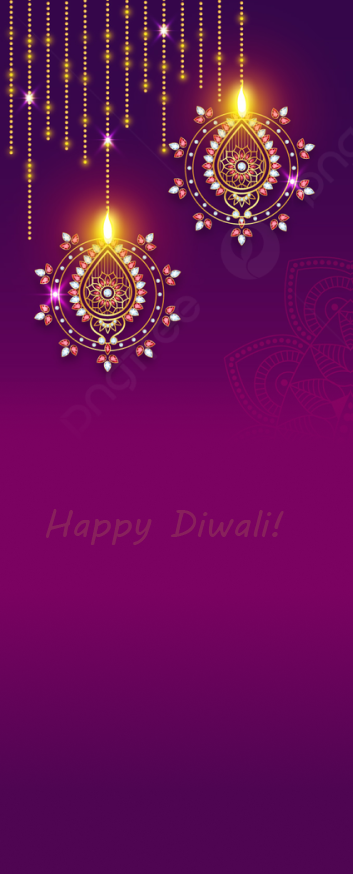
<style>
.page{position:relative;width:353px;height:874px}
.page>*{position:absolute;margin:0}
.t1{font:37.4px "MVBoli";color:#88215c}
</style>
<div class="page">
<p class="t1" style="left:46px;top:509px;width:238px;height:36px">Happy Diwali!</p>
</div>
